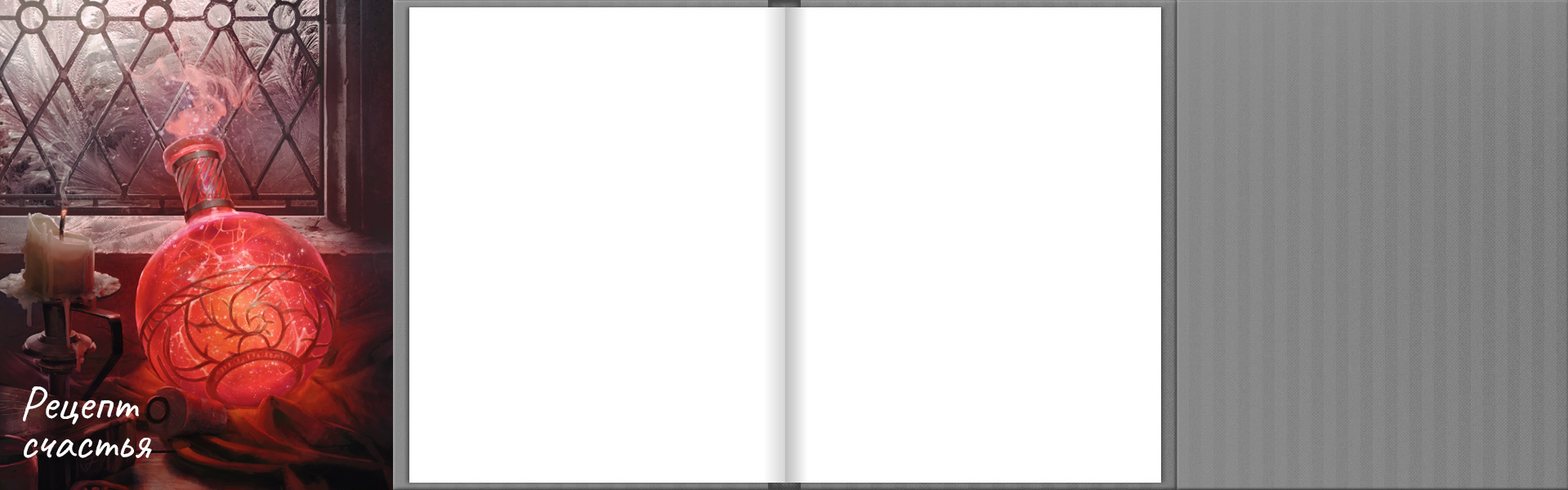
<style>
.page{position:relative;width:1568px;height:490px;background:#ffffff}
.page>*{position:absolute;margin:0}
.t1{font:49px/39.2px "Caveat-Regular";color:#ffffff}
</style>
<div class="page">
<p class="t1" style="left:23px;top:386px;width:129px;height:72px">Рецепт  <br>счастья</p>
</div>
